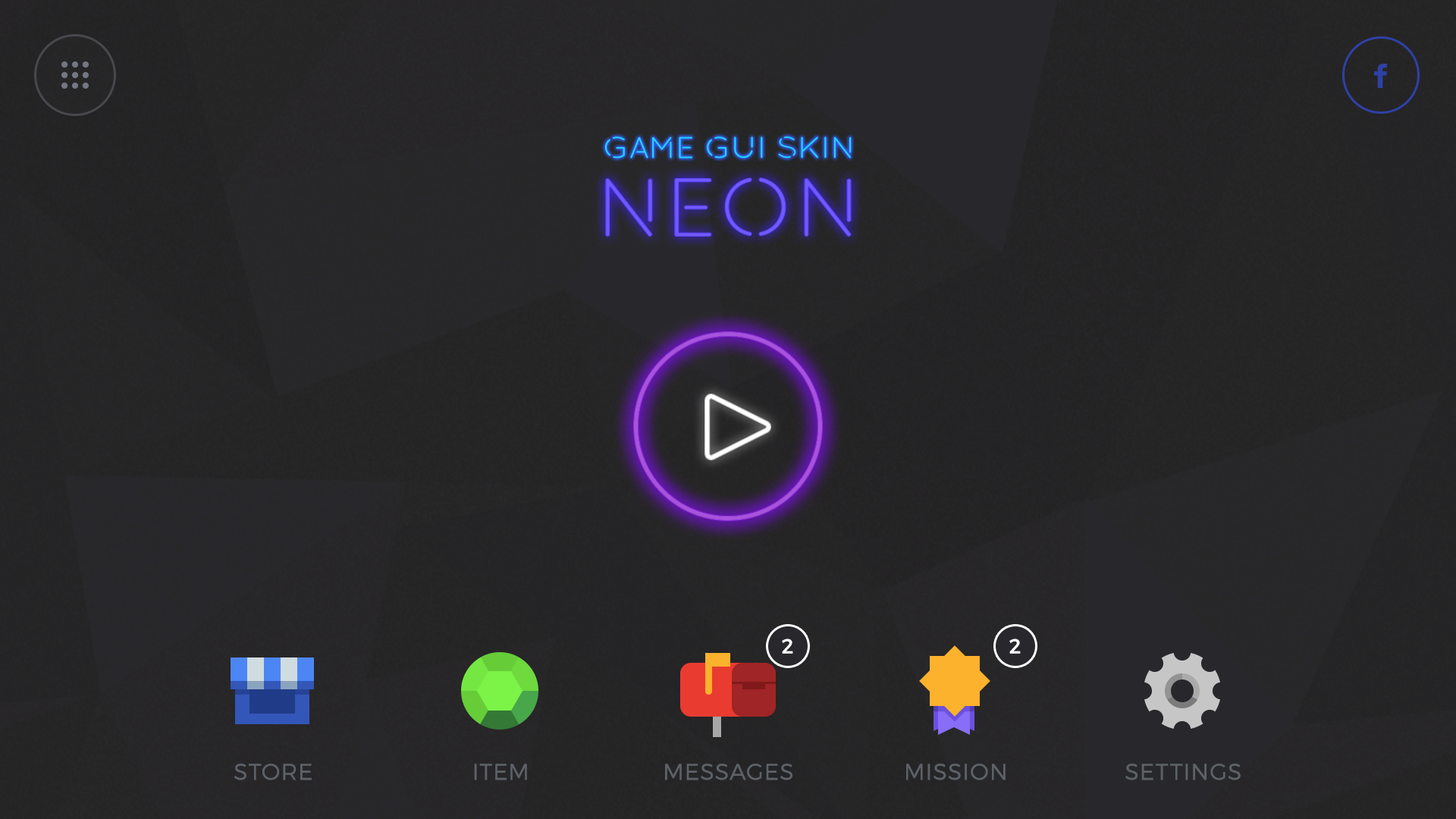
<style>
.page{position:relative;width:1456px;height:819px}
.page>*{position:absolute;margin:0}
.t1{font:20.5px "Montserrat-Regular";letter-spacing:0.04em;color:#ffffff}
.t2{font:22.7px "Montserrat-Light";letter-spacing:0.05em;color:#5d6268;text-transform:uppercase}
</style>
<div class="page">
<p class="t1" style="left:782px;top:639px;width:11px;height:15px">2</p>
<p class="t1" style="left:1009px;top:639px;width:12px;height:15px">2</p>
<p class="t2" style="left:234px;top:764px;width:78px;height:16px">store</p>
<p class="t2" style="left:474px;top:764px;width:53px;height:16px">Item</p>
<p class="t2" style="left:665px;top:764px;width:127px;height:16px">Messages</p>
<p class="t2" style="left:906px;top:764px;width:100px;height:16px">Mission</p>
<p class="t2" style="left:1125px;top:764px;width:116px;height:16px">Settings</p>
</div>
